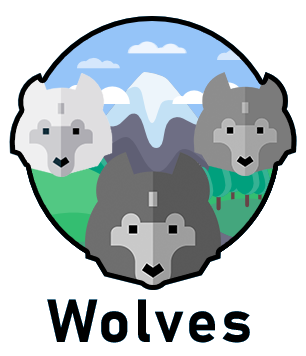
<style>
.page{position:relative;width:306px;height:356px;background:#ffffff}
.page>*{position:absolute;margin:0}
.t1{font:59.8px "Bahnschrift-Bold";letter-spacing:0.05em;color:#000000}
</style>
<div class="page">
<p class="t1" style="left:47px;top:299px;width:203px;height:44px">Wolves</p>
<p class="t1" style="left:47px;top:299px;width:203px;height:44px">Wolves</p>
</div>
